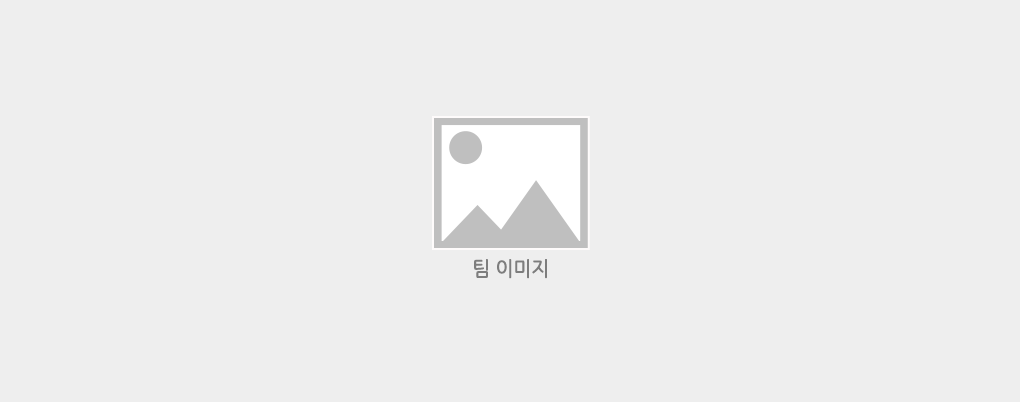
<style>
.page{position:relative;width:1020px;height:402px;background:#eeeeee}
.page>*{position:absolute;margin:0}
.t1{font:20px "NanumGothic";letter-spacing:-0.025em;color:#7d7d7d;font-weight:bold;scale:0.95 1}
</style>
<div class="page">
<p class="t1" style="left:474px;top:259px;width:73px;height:20px">팀 이미지</p>
</div>
